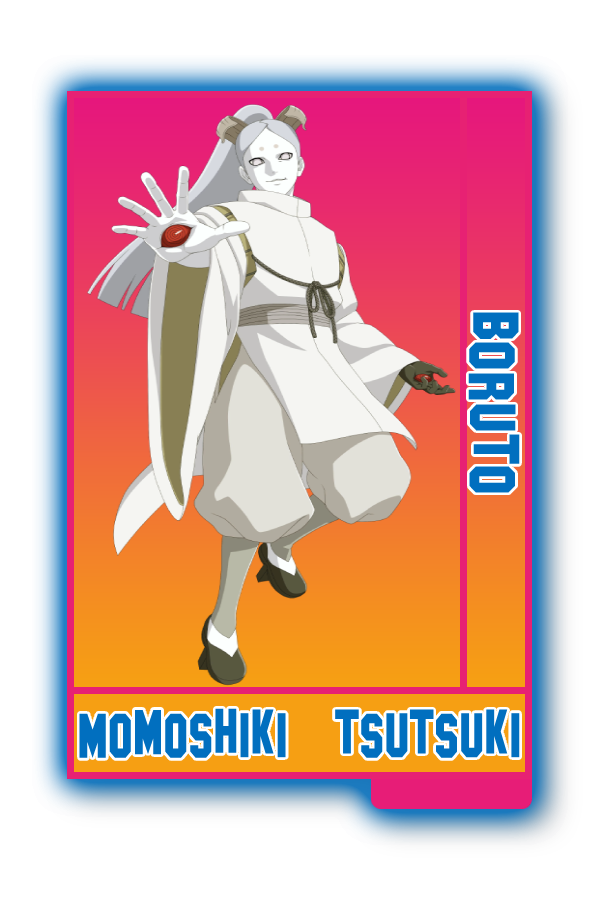
<style>
.page{position:relative;width:600px;height:900px;background:#ffffff}
.page>*{position:absolute;margin:0}
.t1{font:64.7px "SFHollywoodHills";color:#016fbf}
.t2{font:62.9px "SFHollywoodHills";color:#016fbf;scale:0.83 1}
</style>
<div class="page">
<p class="t1" style="left:468px;top:312px;width:52px;height:181px;rotate:90deg">Boruto</p>
<p class="t2" style="left:79px;top:708px;width:441px;height:50px">Momoshiki Ōtsutsuki</p>
</div>
